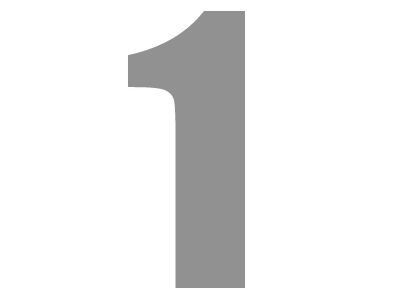
<style>
.page{position:relative;width:400px;height:300px;background:#ffffff}
.page>*{position:absolute;margin:0}
.t1{font:350px "Impact";color:#919191}
</style>
<div class="page">
<p class="t1" style="left:128px;top:11px;width:117px;height:277px">1</p>
</div>
